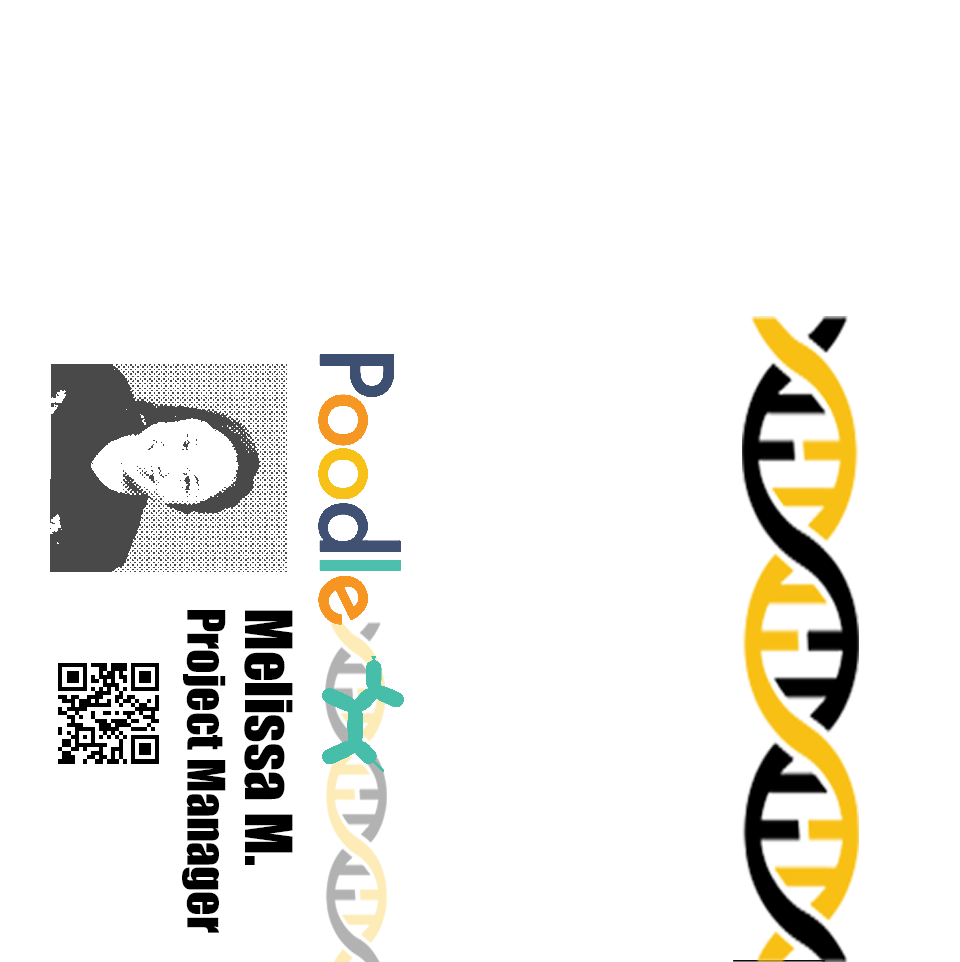
<style>
.page{position:relative;width:960px;height:962px;background:#ffffff}
.page>*{position:absolute;margin:0}
.t1{font:48px "Impact";color:#000000}
.t2{font:60px "Impact";color:#000000}
</style>
<div class="page">
<p class="t1" style="left:182px;top:610px;width:111px;height:323px;rotate:90deg"><span class="t2">Melissa M.<br></span>Project Manager</p>
</div>
